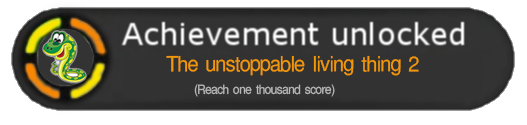
<style>
.page{position:relative;width:527px;height:125px;background:#323232}
.page>*{position:absolute;margin:0}
.t1{font:23.6px "AkaashNormal";color:#f29708;scale:0.96 1}
.t2{font:14px "AkaashNormal";color:#b8b8b8;scale:0.96 1}
</style>
<div class="page">
<p class="t1" style="left:166px;top:55px;width:253px;height:21px">The unstoppable living thing 2</p>
<p class="t2" style="left:194px;top:84px;width:141px;height:13px">(Reach one thousand score)</p>
</div>
